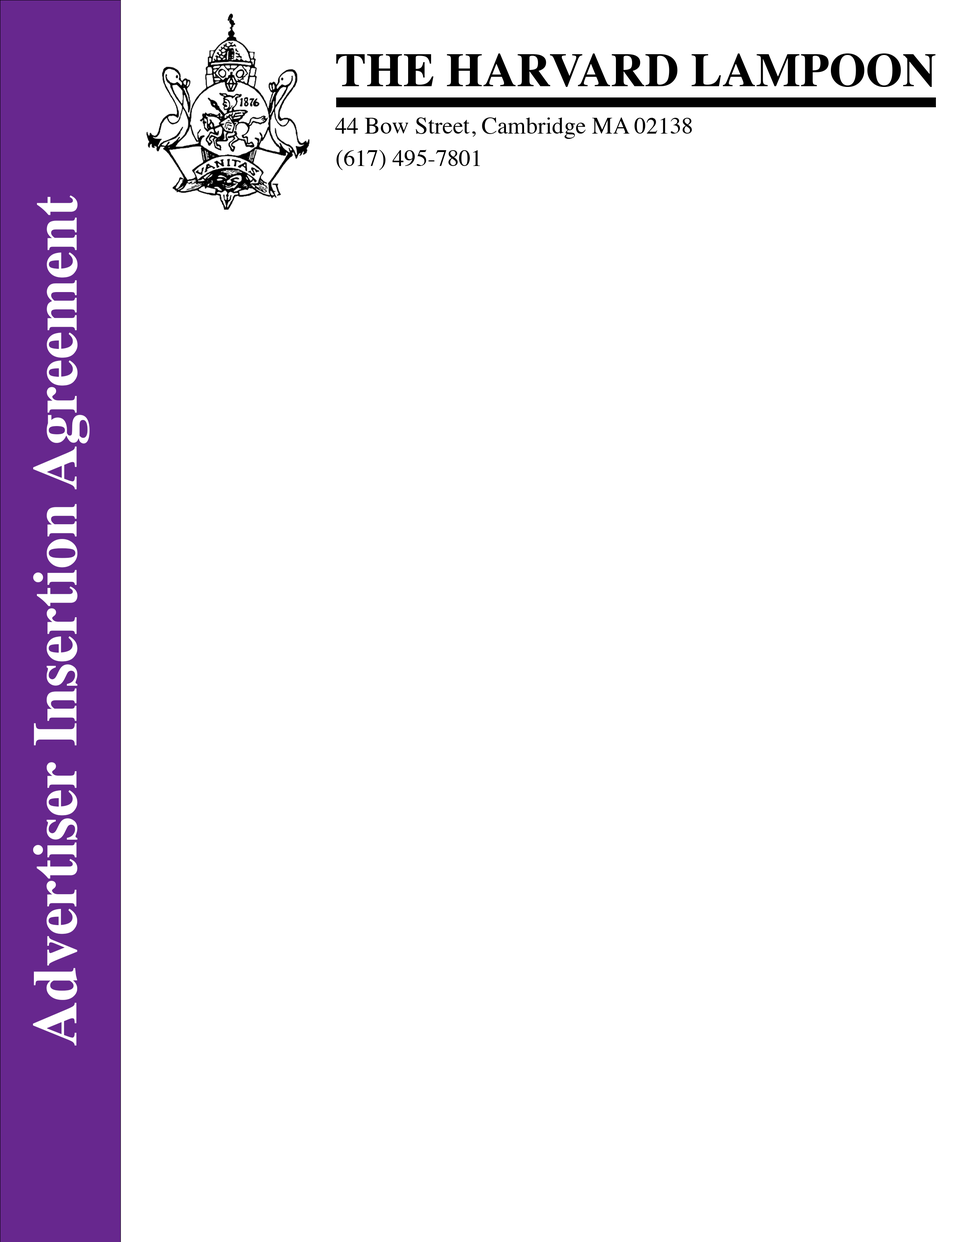
<style>
.page{position:relative;width:960px;height:1242px;background:#ffffff}
.page>*{position:absolute;margin:0}
.t1{font:47.1px "Times-Bold";color:#000000}
.t2{font:23.5px "Times-Roman";color:#000000}
.t3{font:62.7px "Times-Bold";color:#ffffff}
</style>
<div class="page">
<p class="t1" style="left:336px;top:53px;width:599px;height:34px">THE HARVARD LAMPOON</p>
<p class="t2" style="left:335px;top:117px;width:357px;height:22px">44 Bow Street, Cambridge MA 02138</p>
<p class="t2" style="left:336px;top:149px;width:144px;height:21px">(617) 495-7801</p>
<p class="t3" style="left:33px;top:195px;width:57px;height:851px;rotate:-90deg">Advertiser Insertion Agreement</p>
</div>
